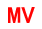
<style>
.page{position:relative;width:42px;height:29px;background:#ffffff}
.page>*{position:absolute;margin:0}
.t1{font:23.1px "SimHei";color:#ff0303;scale:1.21 1}
</style>
<div class="page">
<p class="t1" style="left:8px;top:7px;width:27px;height:16px">MV</p>
</div>
